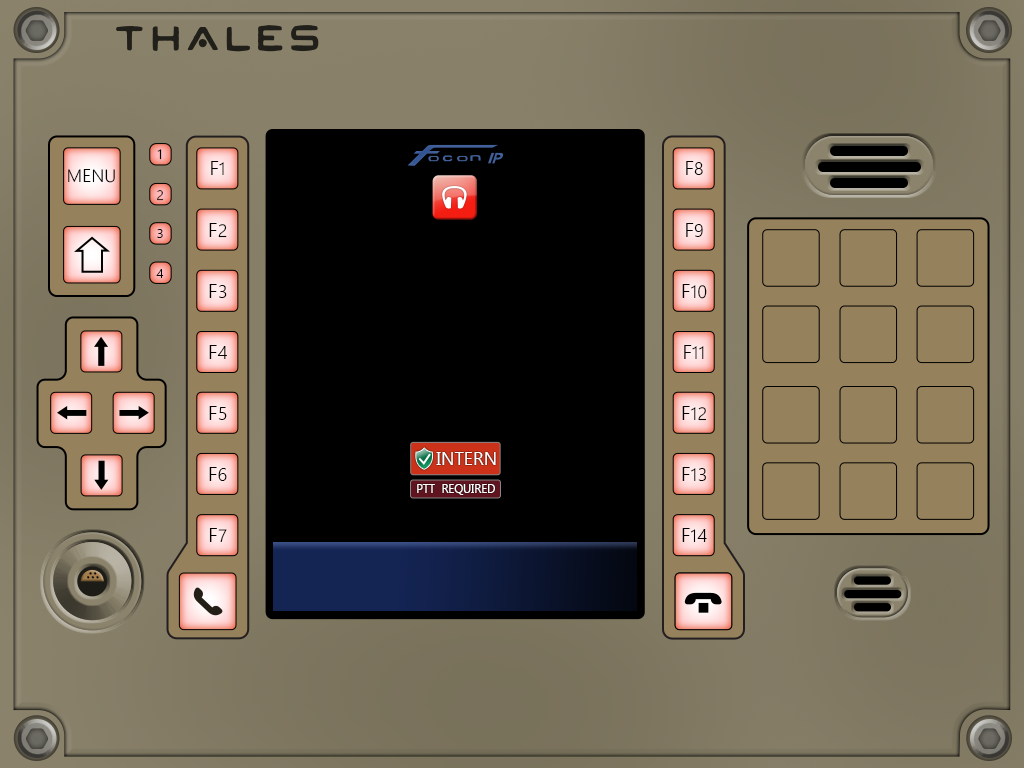
<style>
.page{position:relative;width:1024px;height:768px}
.page>*{position:absolute;margin:0}
.t1{font:13.5px "SegoeUIVariable-SemilightText";color:#000000}
.t2{font:20.2px "SegoeUIVariable-SemilightText";color:#000000}
.t3{font:18px "SegoeUIVariable-SemilightText";color:#000000}
.t4{font:13.5px "SegoeUIVariable-SemilightText"}
.t5{font:18px "Gadugi";color:#ffffff}
.t6{font:11.7px "Gadugi";color:#ffffff}
</style>
<div class="page">
<p class="t1" style="left:157px;top:149px;width:5px;height:11px">1</p>
<p class="t2" style="left:211px;top:161px;width:13px;height:14px">F<span class="t3">1</span></p>
<p class="t2" style="left:686px;top:161px;width:17px;height:14px">F<span class="t3">8</span></p>
<p class="t3" style="left:68px;top:169px;width:47px;height:14px">MENU</p>
<p class="t4" style="left:157px;top:190px;width:7px;height:11px">2</p>
<p class="t1" style="left:157px;top:229px;width:6px;height:9px">3</p>
<p class="t2" style="left:209px;top:223px;width:18px;height:15px">F<span class="t3">2</span></p>
<p class="t2" style="left:686px;top:223px;width:17px;height:14px">F<span class="t3">9</span></p>
<p class="t1" style="left:156px;top:269px;width:8px;height:9px">4</p>
<p class="t2" style="left:209px;top:284px;width:18px;height:14px">F<span class="t3">3</span></p>
<p class="t3" style="left:682px;top:284px;width:25px;height:15px"><span class="t2">F</span>10</p>
<p class="t2" style="left:209px;top:345px;width:18px;height:14px">F<span class="t3">4</span></p>
<p class="t3" style="left:684px;top:345px;width:20px;height:14px"><span class="t2">F</span>11</p>
<p class="t2" style="left:209px;top:406px;width:18px;height:14px">F<span class="t3">5</span></p>
<p class="t3" style="left:682px;top:406px;width:25px;height:15px"><span class="t2">F</span>12</p>
<p class="t5" style="left:436px;top:452px;width:60px;height:13px">INTERN</p>
<p class="t2" style="left:209px;top:467px;width:18px;height:14px">F<span class="t3">6</span></p>
<p class="t3" style="left:682px;top:467px;width:24px;height:14px"><span class="t2">F</span>13</p>
<p class="t6" style="left:417px;top:484px;width:78px;height:11px">PTT  REQUIRED</p>
<p class="t2" style="left:209px;top:528px;width:18px;height:14px">F<span class="t3">7</span></p>
<p class="t3" style="left:682px;top:528px;width:25px;height:15px"><span class="t2">F</span>14</p>
</div>
